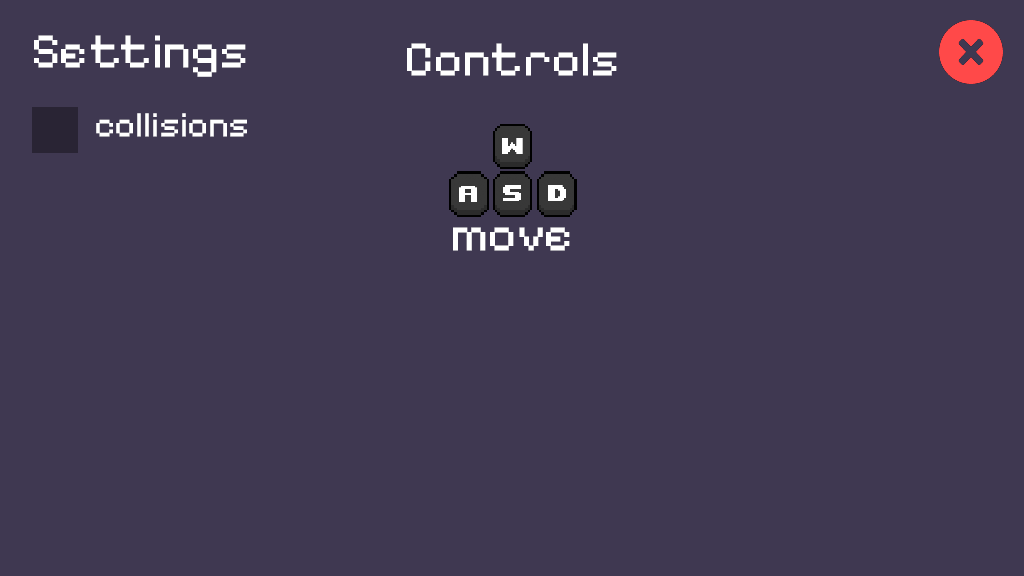
<style>
.page{position:relative;width:1024px;height:576px;background:#3f3851}
.page>*{position:absolute;margin:0}
.t1{font:50px "PixelifySans-Regular";color:#ffffff}
.t2{font:36px "PixelifySans-Regular";color:#ffffff}
</style>
<div class="page">
<p class="t1" style="left:34px;top:35px;width:212px;height:42px">Settings</p>
<p class="t1" style="left:407px;top:43px;width:210px;height:33px">Controls</p>
<p class="t2" style="left:96px;top:113px;width:151px;height:24px">collisions</p>
<p class="t1" style="left:453px;top:227px;width:117px;height:24px">move</p>
</div>
